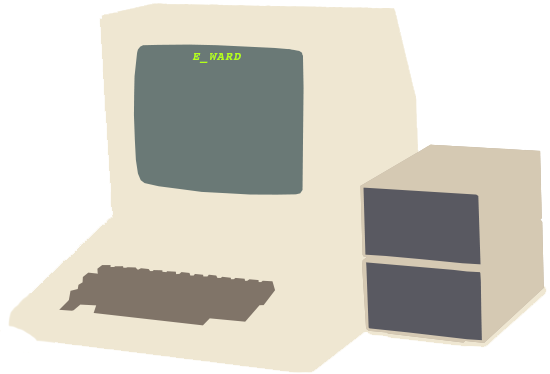
<style>
.page{position:relative;width:550px;height:374px;background:#efe7d2}
.page>*{position:absolute;margin:0}
.t1{font:12px "Courier-BoldOblique";letter-spacing:0.08em;color:#b5ff17}
</style>
<div class="page">
<p class="t1" style="left:192px;top:53px;width:49px;height:10px">E_WARD</p>
</div>
